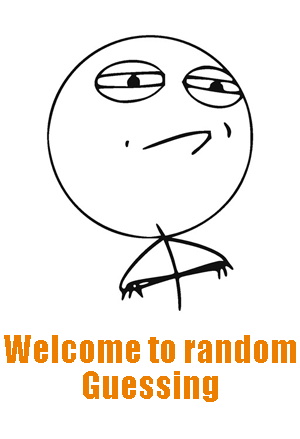
<style>
.page{position:relative;width:300px;height:439px;background:#ffffff}
.page>*{position:absolute;margin:0}
.t1{font:36px/36px "Impact";color:#ec7f00}
</style>
<div class="page">
<p class="t1" style="left:4px;top:335px;width:292px;height:67px;text-align:center">Welcome to random<br>Guessing</p>
</div>
